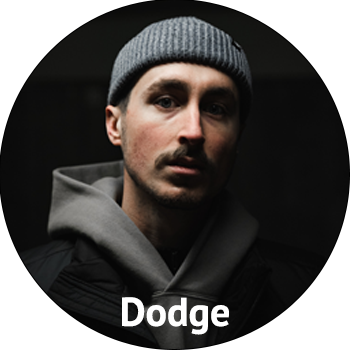
<style>
.page{position:relative;width:350px;height:350px;background:#ffffff}
.page>*{position:absolute;margin:0}
.t1{font:40px "PTSans-Bold";color:#ffffff}
</style>
<div class="page">
<p class="t1" style="left:122px;top:297px;width:107px;height:38px">Dodge</p>
</div>
